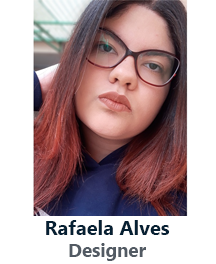
<style>
.page{position:relative;width:216px;height:264px;background:#ffffff}
.page>*{position:absolute;margin:0}
.t1{font:20px "KhmerUI-Bold";color:#062033}
.t2{font:18.7px "KhmerUI-Bold";color:#525a63}
</style>
<div class="page">
<p class="t1" style="left:46px;top:220px;width:124px;height:41px;text-align:center">Rafaela Alves<br><span class="t2">Designer</span></p>
</div>
